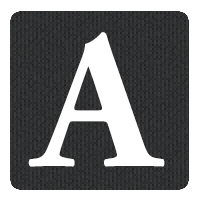
<style>
.page{position:relative;width:200px;height:200px;background:#ffffff}
.page>*{position:absolute;margin:0}
.t1{font:197.6px "AGaramondPro-Bold";color:#ffffff}
</style>
<div class="page">
<p class="t1" style="left:28px;top:32px;width:137px;height:135px">A</p>
</div>
